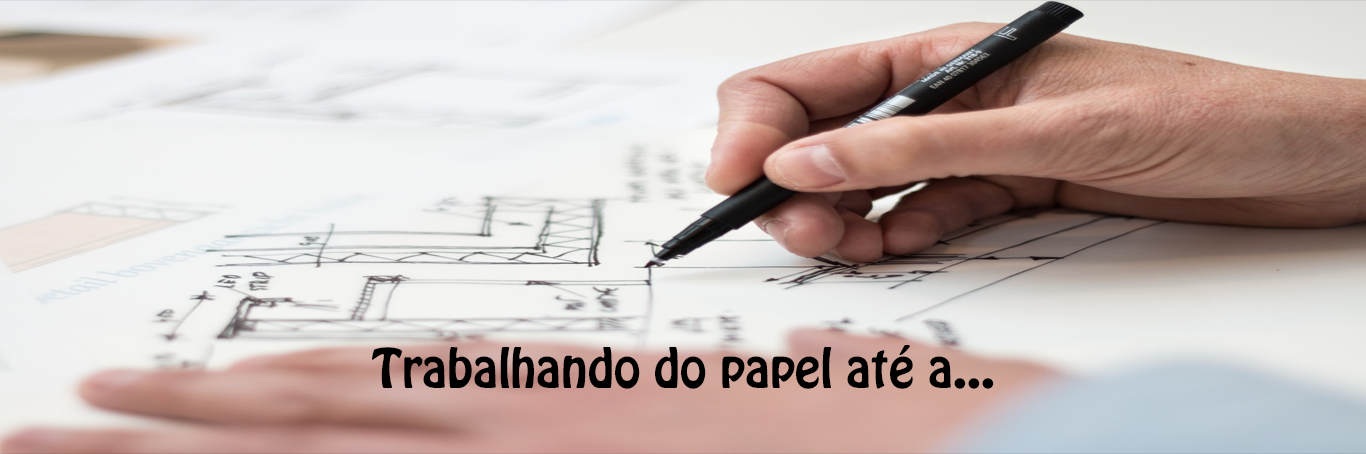
<style>
.page{position:relative;width:1366px;height:454px}
.page>*{position:absolute;margin:0}
.t1{font:48px "HoboStd";color:#000000}
</style>
<div class="page">
<p class="t1" style="left:372px;top:345px;width:622px;height:44px">Trabalhando do papel até a...</p>
</div>
